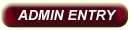
<style>
.page{position:relative;width:130px;height:30px}
.page>*{position:absolute;margin:0}
.t1{font:14px "Arial-BoldItalicMT";color:#fcfbf9}
</style>
<div class="page">
<p class="t1" style="left:17px;top:10px;width:100px;height:10px">ADMIN ENTRY</p>
</div>
